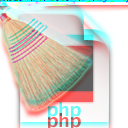
<style>
.page{position:relative;width:128px;height:128px}
.page>*{position:absolute;margin:0}
.t1{font:18px "LucidaGrande-Bold";letter-spacing:-0.02em}
</style>
<div class="page">
<p class="t1" style="left:48px;top:100px;width:33px;height:18px">php</p>
</div>
